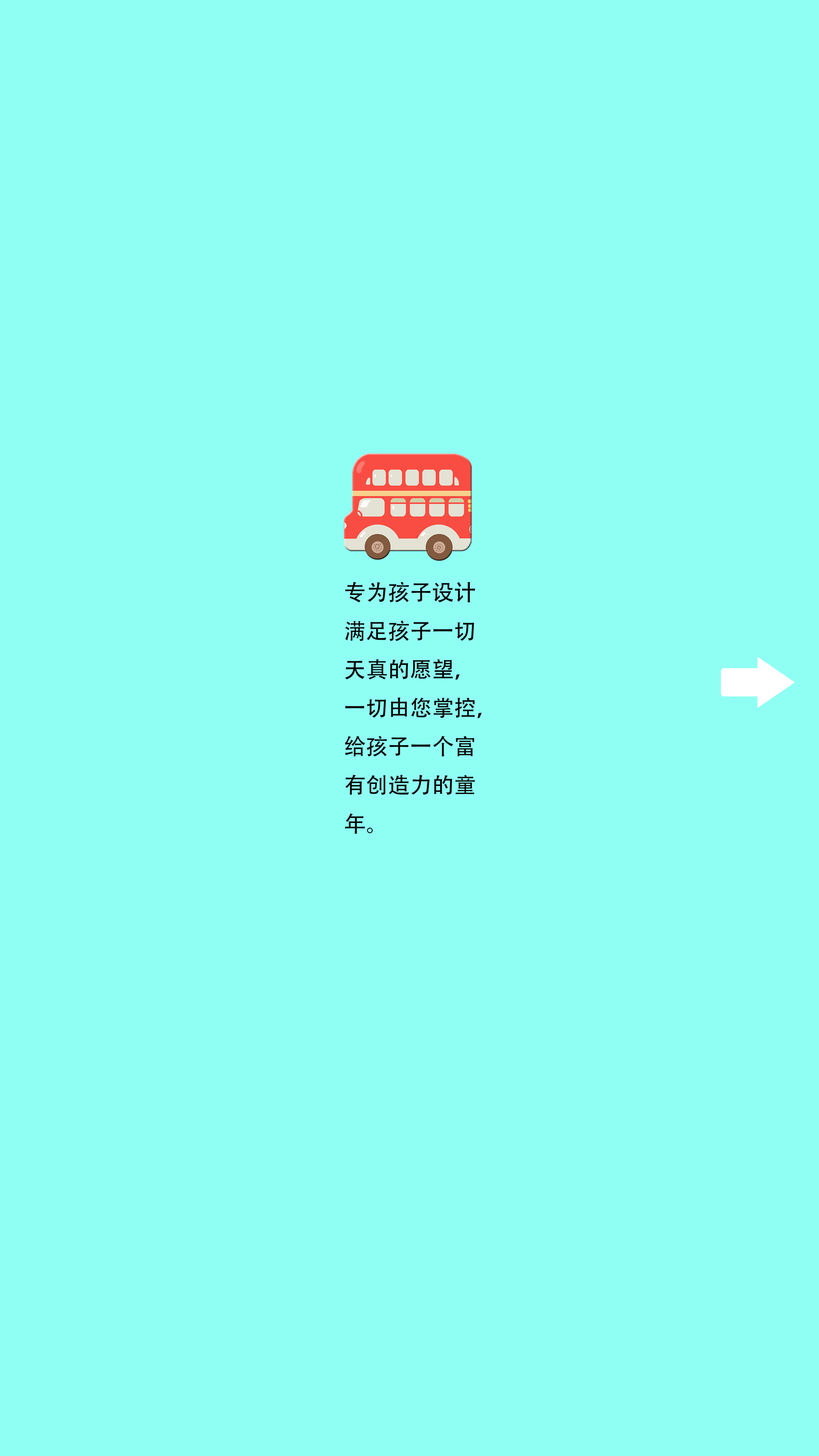
<style>
.page{position:relative;width:819px;height:1456px;background:#8ffff4}
.page>*{position:absolute;margin:0}
.t1{font:22px "AdobeHeitiStd-Regular";color:#050505}
</style>
<div class="page">
<p class="t1" style="left:345px;top:582px;width:136px;height:252px">专为孩子设计<br>满足孩子一切<br>天真的愿望，<br>一切由您掌控，<br>给孩子一个富<br>有创造力的童<br>年。</p>
</div>
